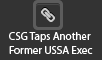
<style>
.page{position:relative;width:102px;height:60px;background:#333333}
.page>*{position:absolute;margin:0}
.t1{font:11px "MyriadPro-Regular";color:#ffffff}
</style>
<div class="page">
<p class="t1" style="left:9px;top:32px;width:84px;height:22px">CSG Taps Another Former USSA Exec</p>
</div>
